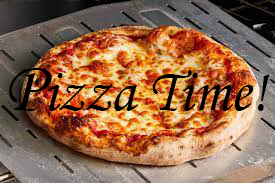
<style>
.page{position:relative;width:275px;height:183px}
.page>*{position:absolute;margin:0}
.t1{font:60px "MonotypeCorsiva";color:#000000}
.t2{font:72px "MonotypeCorsiva";color:#000000}
</style>
<div class="page">
<p class="t1" style="left:9px;top:68px;width:261px;height:43px"><span class="t2">P</span>izza Time!</p>
</div>
